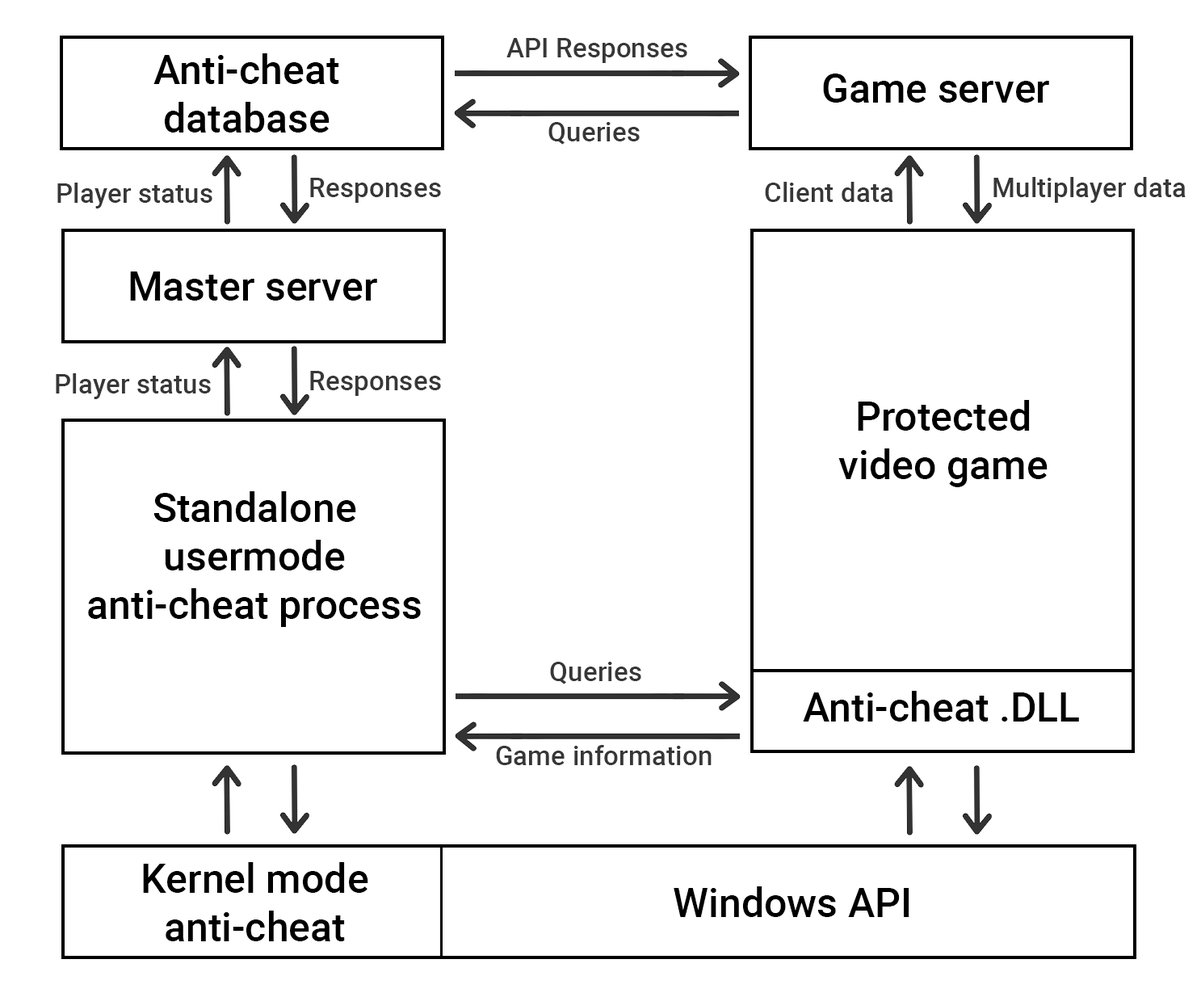
<style>
.page{position:relative;width:1201px;height:993px;background:#ffffff}
.page>*{position:absolute;margin:0}
.t1{font:26.9px "Roboto-Medium";color:#373737}
.t2{font:40.4px "Roboto-Medium";color:#000000}
</style>
<div class="page">
<p class="t1" style="left:506px;top:38px;width:181px;height:25px">API Responses</p>
<p class="t2" style="left:153px;top:53px;width:186px;height:79px;text-align:center">Anti-cheat<br>database</p>
<p class="t2" style="left:823px;top:74px;width:226px;height:29px">Game server</p>
<p class="t1" style="left:548px;top:122px;width:92px;height:23px">Queries</p>
<p class="t1" style="left:57px;top:183px;width:155px;height:25px">Player status</p>
<p class="t1" style="left:310px;top:178px;width:131px;height:25px">Responses</p>
<p class="t1" style="left:765px;top:182px;width:128px;height:20px">Client data</p>
<p class="t1" style="left:994px;top:177px;width:192px;height:26px">Multiplayer data</p>
<p class="t2" style="left:130px;top:271px;width:247px;height:29px">Master server</p>
<p class="t1" style="left:56px;top:373px;width:155px;height:26px">Player status</p>
<p class="t1" style="left:310px;top:371px;width:131px;height:25px">Responses</p>
<p class="t2" style="left:838px;top:400px;width:210px;height:87px;text-align:center">Protected<br>video game</p>
<p class="t2" style="left:88px;top:491px;width:333px;height:136px;text-align:center">Standalone<br>usermode<br>anti-cheat process</p>
<p class="t1" style="left:550px;top:662px;width:91px;height:22px">Queries</p>
<p class="t2" style="left:803px;top:691px;width:276px;height:30px">Anti-cheat .DLL</p>
<p class="t1" style="left:496px;top:745px;width:216px;height:20px">Game information</p>
<p class="t2" style="left:143px;top:862px;width:225px;height:79px;text-align:center">Kernel mode<br>anti-cheat</p>
<p class="t2" style="left:674px;top:886px;width:236px;height:31px">Windows API</p>
</div>
